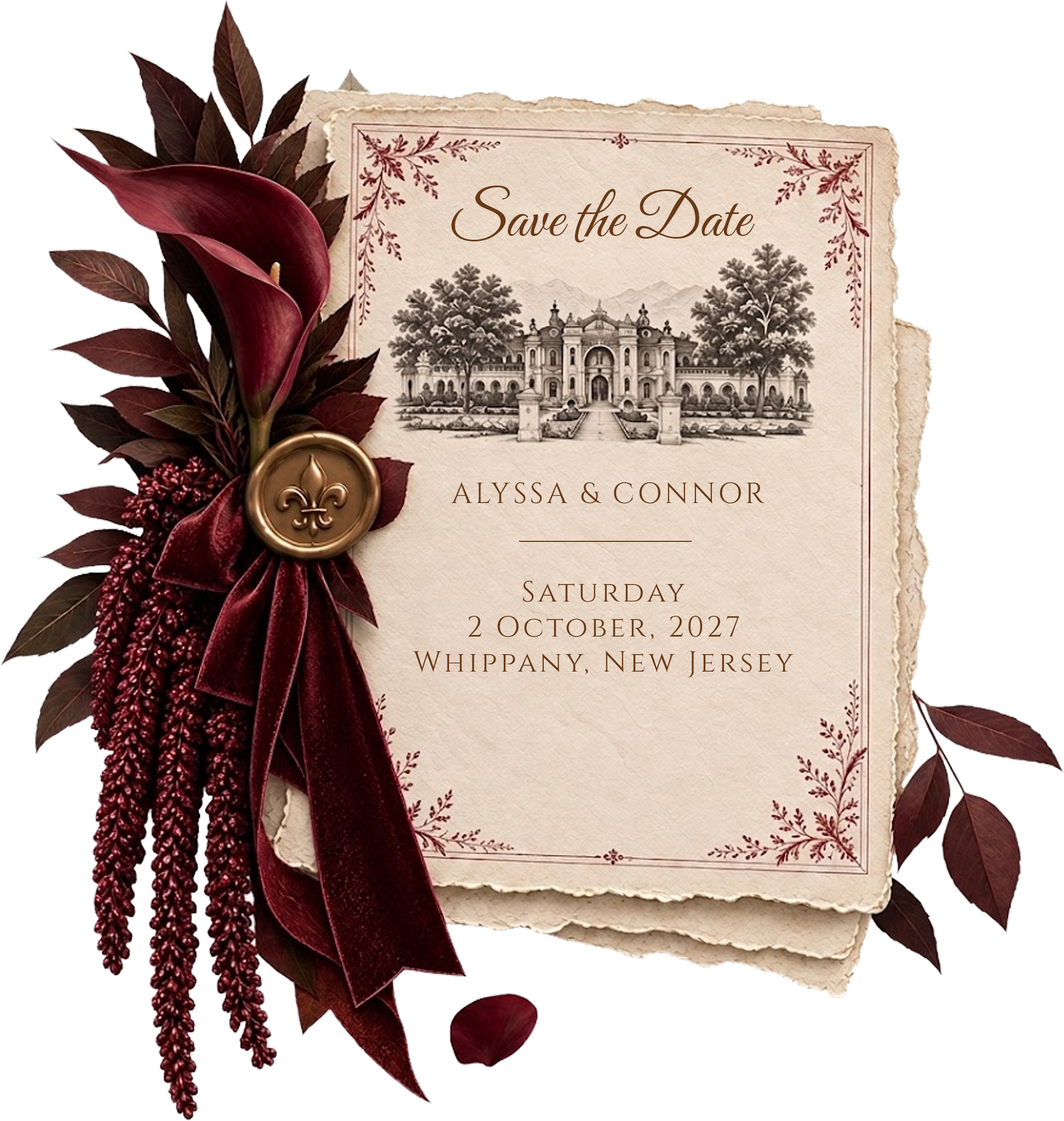
<style>
.page{position:relative;width:1064px;height:1121px;background:#ffffff}
.page>*{position:absolute;margin:0}
.t1{font:62px "GreatVibes-Regular";color:#693915}
.t2{font:29.1px "Cinzel-Regular";letter-spacing:0.1em;color:#693915}
</style>
<div class="page">
<p class="t1" style="left:451px;top:186px;width:303px;height:57px">Save the Date</p>
<p class="t2" style="left:451px;top:482px;width:314px;height:22px">ALYSSA &amp; CONNOR</p>
<p class="t2" style="left:412px;top:581px;width:382px;height:97px;text-align:center">Saturday<br>2 October, 2027<br>Whippany, New Jersey</p>
</div>
